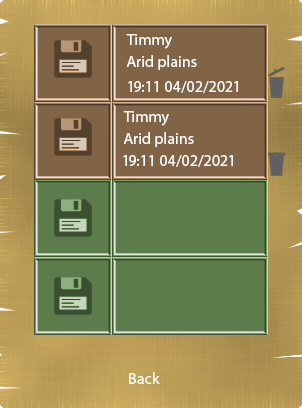
<style>
.page{position:relative;width:302px;height:408px;background:#5c7c4b}
.page>*{position:absolute;margin:0}
.t1{font:16px "MyriadPro-Regular";color:#ffffff}
</style>
<div class="page">
<p class="t1" style="left:126px;top:34px;width:46px;height:15px">Timmy</p>
<p class="t1" style="left:126px;top:55px;width:71px;height:15px">Arid plains</p>
<p class="t1" style="left:128px;top:81px;width:110px;height:12px">19:11 04/02/2021</p>
<p class="t1" style="left:123px;top:111px;width:46px;height:15px">Timmy</p>
<p class="t1" style="left:123px;top:132px;width:71px;height:15px">Arid plains</p>
<p class="t1" style="left:123px;top:155px;width:110px;height:12px">19:11 04/02/2021</p>
<p class="t1" style="left:129px;top:372px;width:31px;height:12px">Back</p>
</div>
